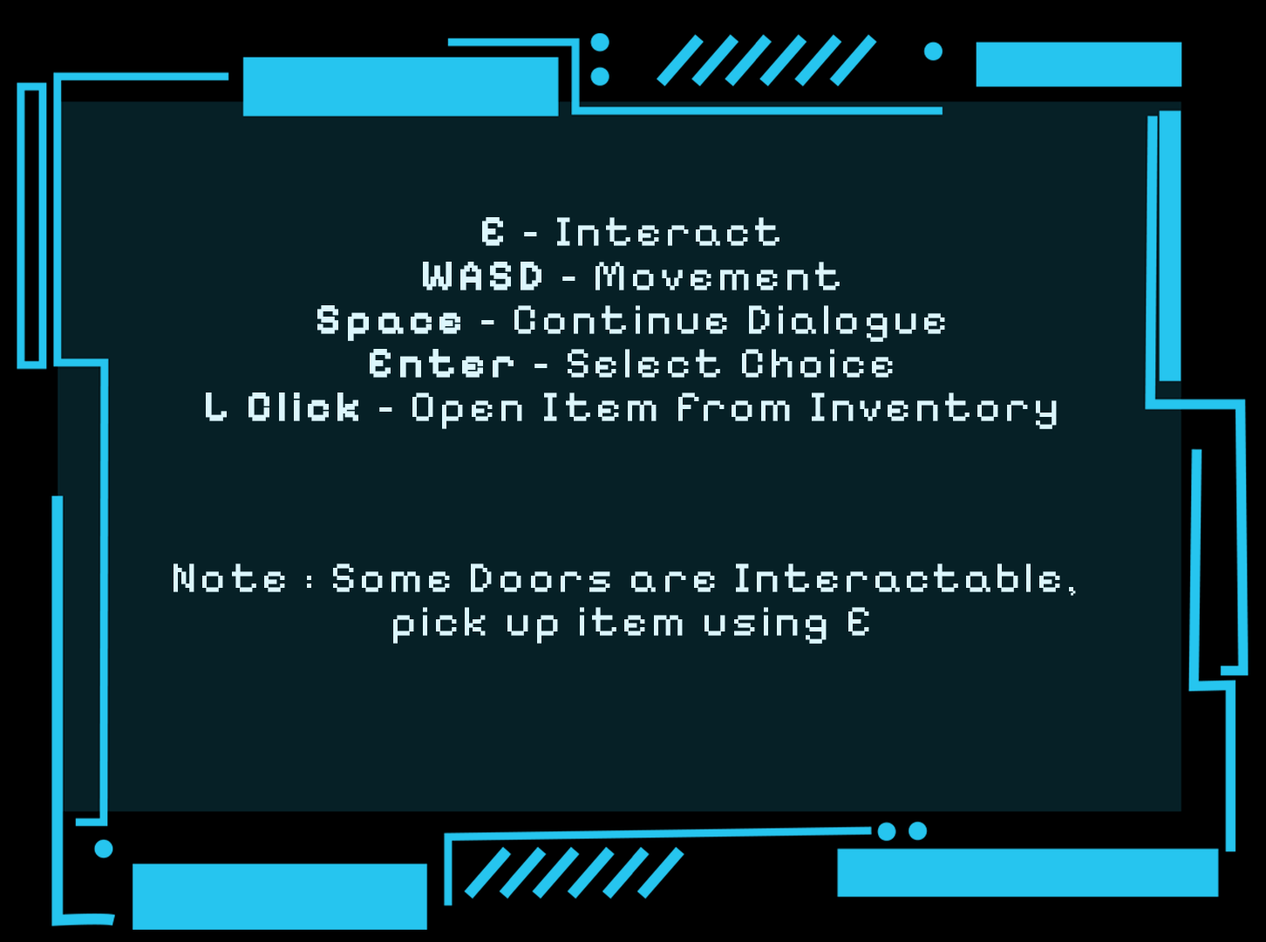
<style>
.page{position:relative;width:1266px;height:942px;background:#062026}
.page>*{position:absolute;margin:0}
.t1{font:43.6px/43.8px "PixelifySans-Regular";letter-spacing:0.095em;color:#dcf6fc;font-weight:bold}
.t2{font:43.6px/43.8px "PixelifySans-Bold";letter-spacing:0.095em;color:#dcf6fc;font-weight:bold}
</style>
<div class="page">
<p class="t1" style="left:206px;top:217px;width:851px;height:212px;text-align:center"><span class="t2">E</span> - Interact<br><span class="t2">WASD</span> - Movement<br><span class="t2">Space</span> - Continue Dialogue<br><span class="t2">Enter</span> - Select Choice<br><span class="t2">L Click</span> - Open Item from Inventory</p>
<p class="t1" style="left:174px;top:563px;width:902px;height:81px;text-align:center">Note : Some Doors are Interactable, <br>pick up item using E</p>
</div>
